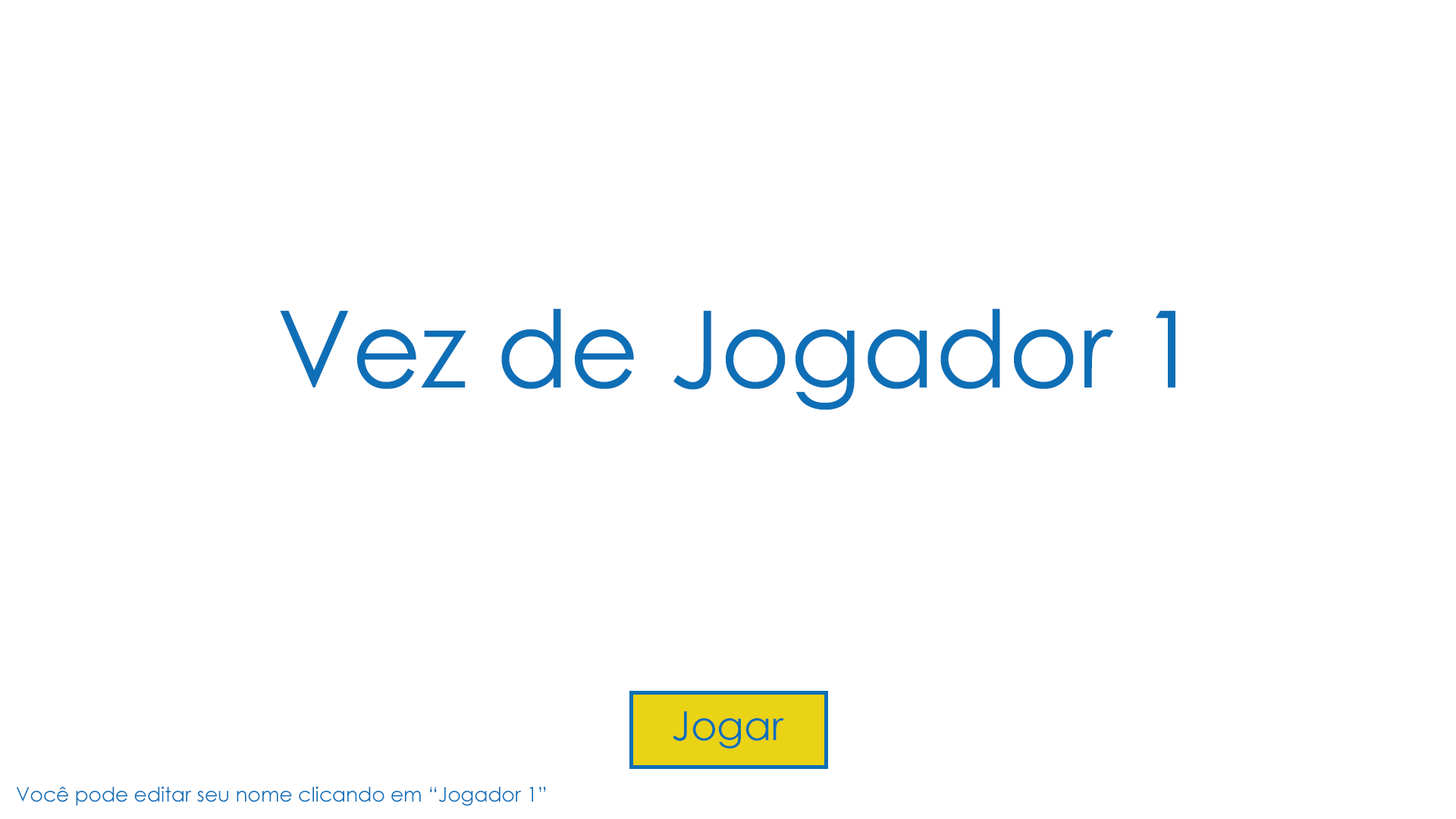
<style>
.page{position:relative;width:1456px;height:819px;background:#ffffff}
.page>*{position:absolute;margin:0}
.t1{font:107px "CenturyGothic";color:#0e6fb6}
.t2{font:40.1px "CenturyGothic";color:#0e6fb6}
.t3{font:20.1px "CenturyGothic";color:#0e6fb6}
</style>
<div class="page">
<p class="t1" style="left:280px;top:309px;width:895px;height:101px">Vez de Jogador 1</p>
<p class="t2" style="left:673px;top:711px;width:111px;height:37px">Jogar</p>
<p class="t3" style="left:16px;top:786px;width:530px;height:20px">Você pode editar seu nome clicando em “Jogador 1”</p>
</div>
